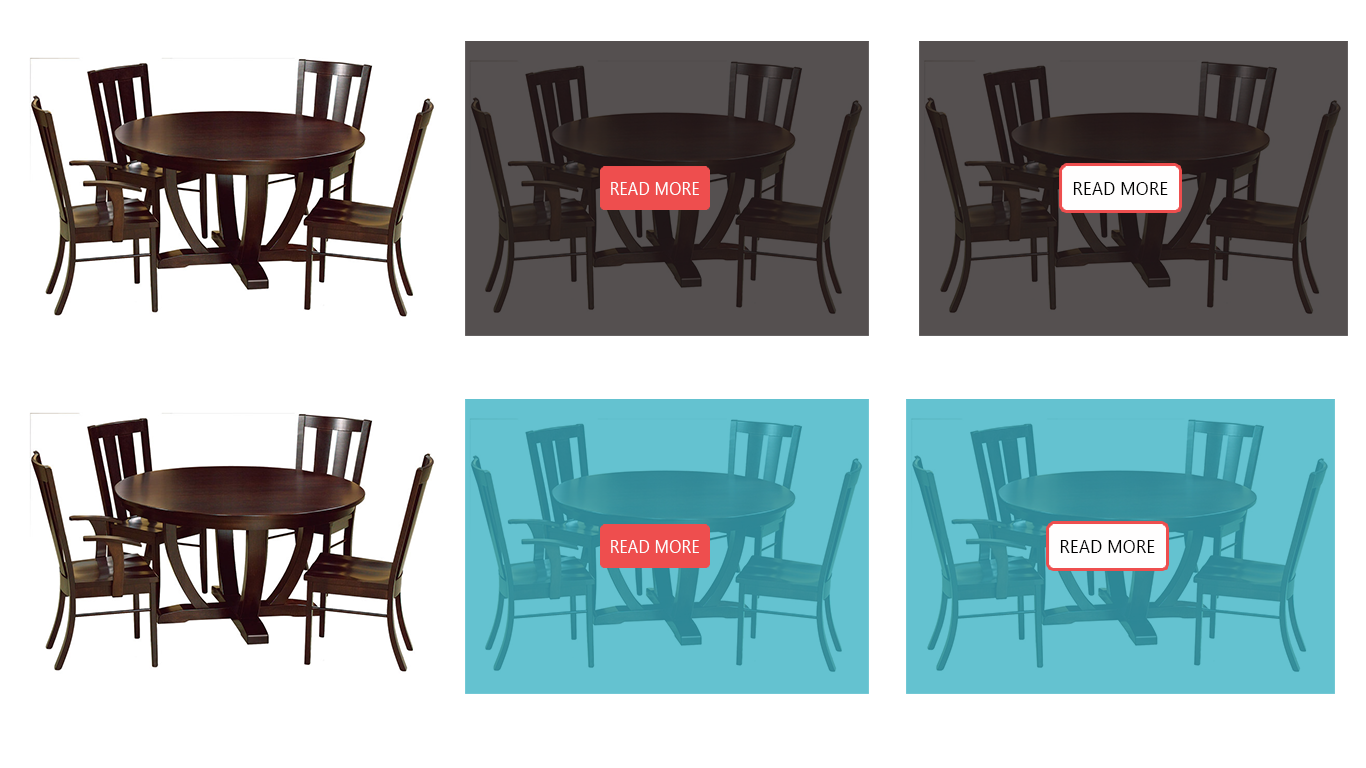
<style>
.page{position:relative;width:1366px;height:768px;background:#ffffff}
.page>*{position:absolute;margin:0}
.t1{font:17.8px "Gadugi";color:#fdfefe;scale:0.92 1}
.t2{font:17.8px "Gadugi";color:#000000}
</style>
<div class="page">
<p class="t1" style="left:611px;top:182px;width:88px;height:13px">READ MORE</p>
<p class="t2" style="left:1073px;top:182px;width:95px;height:13px">READ MORE</p>
<p class="t1" style="left:611px;top:540px;width:88px;height:13px">READ MORE</p>
<p class="t2" style="left:1060px;top:540px;width:95px;height:13px">READ MORE</p>
</div>
